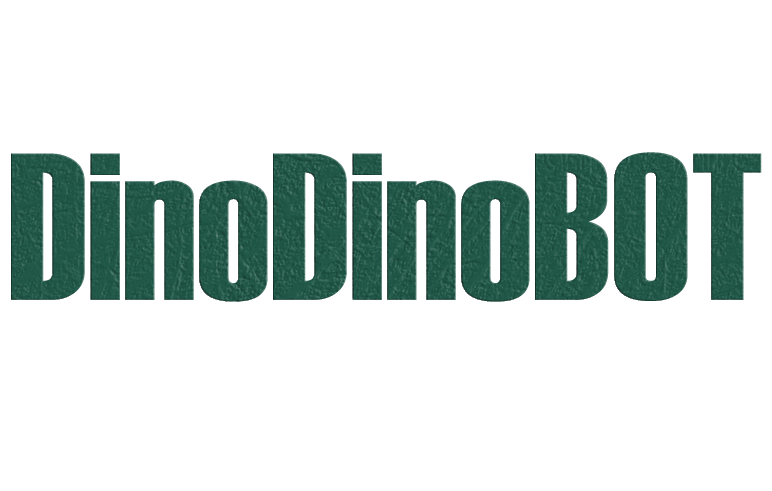
<style>
.page{position:relative;width:772px;height:491px;background:#ffffff}
.page>*{position:absolute;margin:0}
.t1{font:208.6px "Haettenschweiler";color:#205747}
</style>
<div class="page">
<p class="t1" style="left:11px;top:152px;width:751px;height:150px">DinoDinoBOT</p>
</div>
